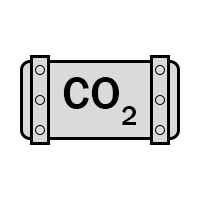
<style>
.page{position:relative;width:200px;height:200px;background:#ffffff}
.page>*{position:absolute;margin:0}
.t1{font:48px "FranklinGothic-Medium";color:#000000}
</style>
<div class="page">
<p class="t1" style="left:63px;top:77px;width:73px;height:48px">CO2</p>
</div>
